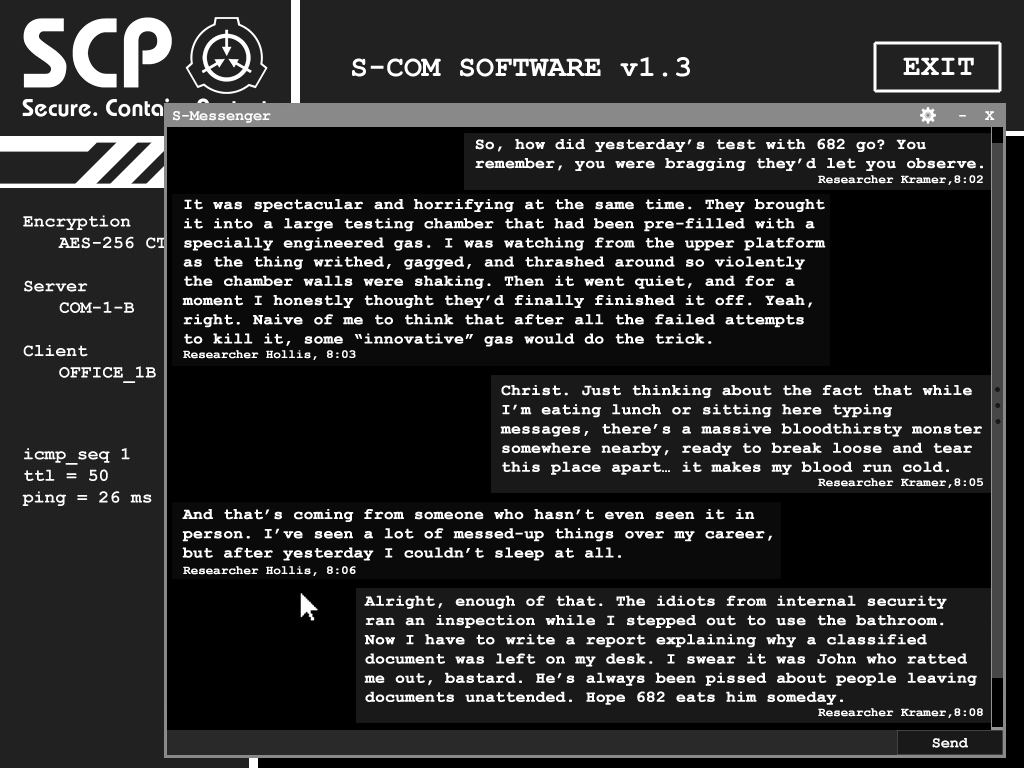
<style>
.page{position:relative;width:1024px;height:768px;background:#000000}
.page>*{position:absolute;margin:0}
.t1{font:16px "CourierNewPS-BoldMT";color:#ffffff;font-weight:bold}
.t2{font:12px "CourierNewPS-BoldMT";color:#ffffff;font-weight:bold}
</style>
<div class="page">
<p class="t1" style="left:475px;top:138px;width:508px;height:33px">So, how did yesterday’s test with 682 go? You remember, you were bragging they’d let you observe.</p>
<p class="t2" style="left:818px;top:175px;width:165px;height:10px">Researcher Kramer,8:02</p>
<p class="t1" style="left:182px;top:199px;width:644px;height:148px">It was spectacular and horrifying at the same time. They brought it into a large testing chamber that had been pre-filled with a specially engineered gas. I was watching from the upper platform as the thing writhed, gagged, and thrashed around so violently the chamber walls were shaking. Then it went quiet, and for a moment I honestly thought they’d finally finished it off. Yeah, right. Naive of me to think that after all the failed attempts to kill it, some “innovative” gas would do the trick.</p>
<p class="t2" style="left:183px;top:350px;width:173px;height:10px">Researcher Hollis, 8:03</p>
<p class="t1" style="left:500px;top:385px;width:482px;height:90px">Christ. Just thinking about the fact that while I’m eating lunch or sitting here typing messages, there’s a massive bloodthirsty monster somewhere nearby, ready to break loose and tear this place apart… it makes my blood run cold.</p>
<p class="t2" style="left:818px;top:478px;width:165px;height:10px">Researcher Kramer,8:05</p>
<p class="t1" style="left:182px;top:509px;width:590px;height:52px">And that’s coming from someone who hasn’t even seen it in person. I’ve seen a lot of messed-up things over my career, but after yesterday I couldn’t sleep at all.</p>
<p class="t2" style="left:183px;top:566px;width:173px;height:10px">Researcher Hollis, 8:06</p>
<p class="t1" style="left:364px;top:595px;width:613px;height:110px">Alright, enough of that. The idiots from internal security ran an inspection while I stepped out to use the bathroom. Now I have to write a report explaining why a classified document was left on my desk. I swear it was John who ratted me out, bastard. He’s always been pissed about people leaving documents unattended. Hope 682 eats him someday.</p>
<p class="t2" style="left:818px;top:708px;width:165px;height:10px">Researcher Kramer,8:08</p>
</div>
